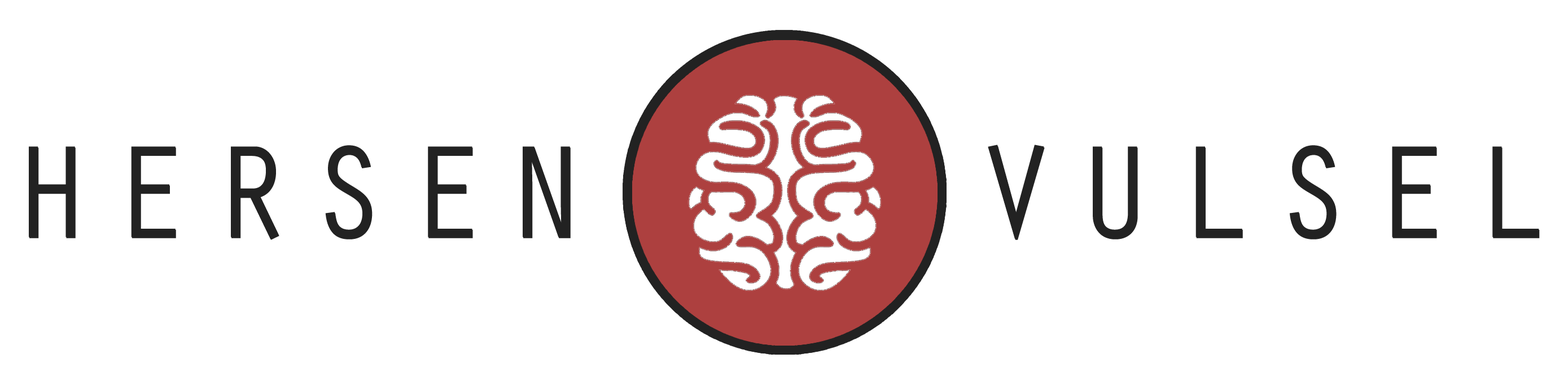
<style>
.page{position:relative;width:1568px;height:384px;background:#ffffff}
.page>*{position:absolute;margin:0}
.t1{font:135.5px "OratorStd";letter-spacing:0.13em;color:#222222}
</style>
<div class="page">
<p class="t1" style="left:29px;top:144px;width:1510px;height:95px">HERSEN     VULSEL</p>
</div>
